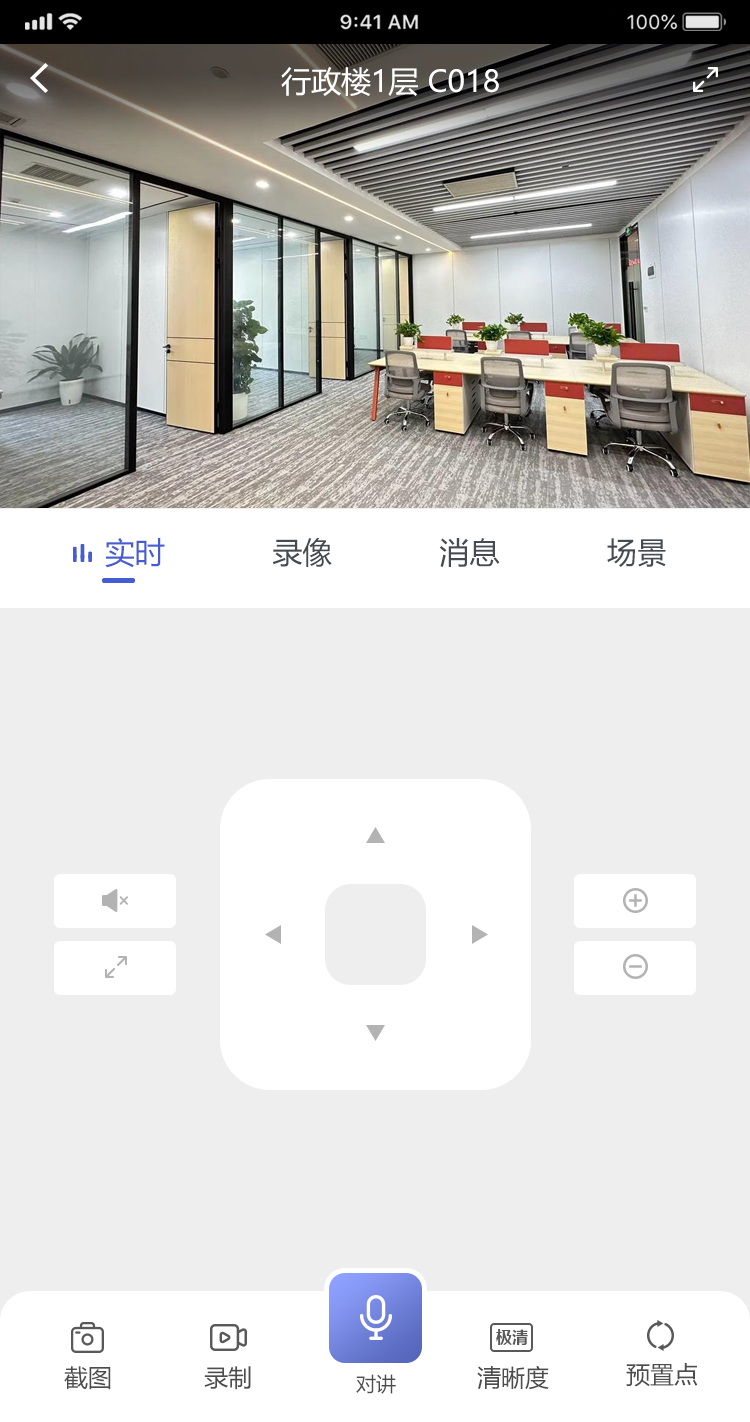
<style>
.page{position:relative;width:750px;height:1422px;background:#eeeeee}
.page>*{position:absolute;margin:0}
.t1{font:30px "MicrosoftYaHei";color:#ffffff}
.t2{font:30px "MicrosoftYaHei";color:#464b53}
.t3{font:30px "MicrosoftYaHei";color:#455cd3}
.t4{font:16px "MicrosoftYaHei-Bold";color:#595959}
.t5{font:24px "MicrosoftYaHei";color:#4d4d4d}
.t6{font:20px "MicrosoftYaHei";color:#4d4d4d}
</style>
<div class="page">
<p class="t1" style="left:281px;top:67px;width:218px;height:29px">行政楼1层 C018</p>
<p class="t2" style="left:105px;top:538px;width:561px;height:30px"><span class="t3">实时            </span>录像            消息            场景</p>
<p class="t4" style="left:496px;top:1329px;width:32px;height:16px">极清</p>
<p class="t5" style="left:64px;top:1366px;width:47px;height:24px">截图</p>
<p class="t5" style="left:204px;top:1366px;width:47px;height:24px">录制</p>
<p class="t6" style="left:356px;top:1374px;width:40px;height:20px">对讲</p>
<p class="t5" style="left:477px;top:1365px;width:72px;height:25px">清晰度</p>
<p class="t5" style="left:626px;top:1363px;width:72px;height:24px">预置点</p>
</div>
